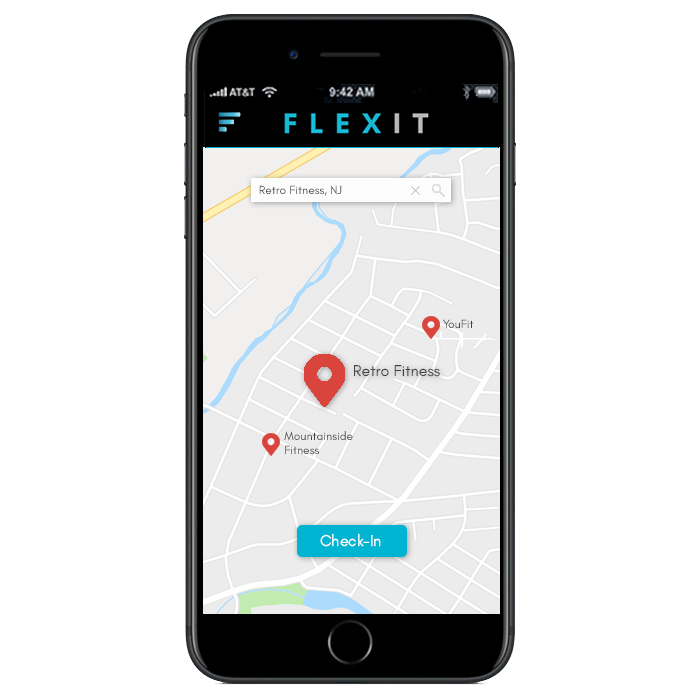
<style>
.page{position:relative;width:700px;height:700px;background:#ffffff}
.page>*{position:absolute;margin:0}
.t1{font:12px "GlacialIndifference-Regular"}
.t2{font:12px "GlacialIndifference-Regular";color:#444445}
.t3{font:16px "GlacialIndifference-Regular";color:#444445}
.t4{font:16px "GlacialIndifference-Regular";color:#ffffff}
</style>
<div class="page">
<p class="t1" style="left:259px;top:185px;width:83px;height:11px">Retro Fitness, NJ</p>
<p class="t2" style="left:442px;top:319px;width:32px;height:9px">YouFit</p>
<p class="t3" style="left:354px;top:365px;width:86px;height:12px">Retro Fitness</p>
<p class="t2" style="left:284px;top:431px;width:69px;height:24px">Mountainside<br>Fitness</p>
<p class="t4" style="left:320px;top:533px;width:61px;height:14px">Check-In</p>
</div>
